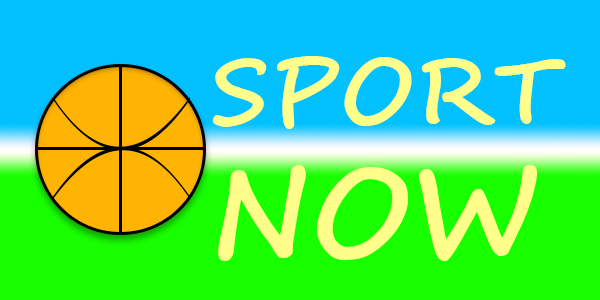
<style>
.page{position:relative;width:600px;height:300px;background:#18ff00}
.page>*{position:absolute;margin:0}
.t1{font:91.7px "SegoeScript-Bold";color:#fffe8a}
.t2{font:125px "SegoePrint-Bold";color:#fffe8a}
</style>
<div class="page">
<p class="t1" style="left:212px;top:56px;width:354px;height:73px">SPORTS</p>
<p class="t2" style="left:218px;top:165px;width:319px;height:96px">NOW</p>
</div>
